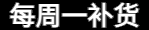
<style>
.page{position:relative;width:149px;height:30px;background:#000000}
.page>*{position:absolute;margin:0}
.t1{font:26px "WebPSD-18463539-0-Regular";color:#ffffff;font-weight:bold}
</style>
<div class="page">
<p class="t1" style="left:0px;top:0px;width:149px;height:30px">每周一补货</p>
</div>
